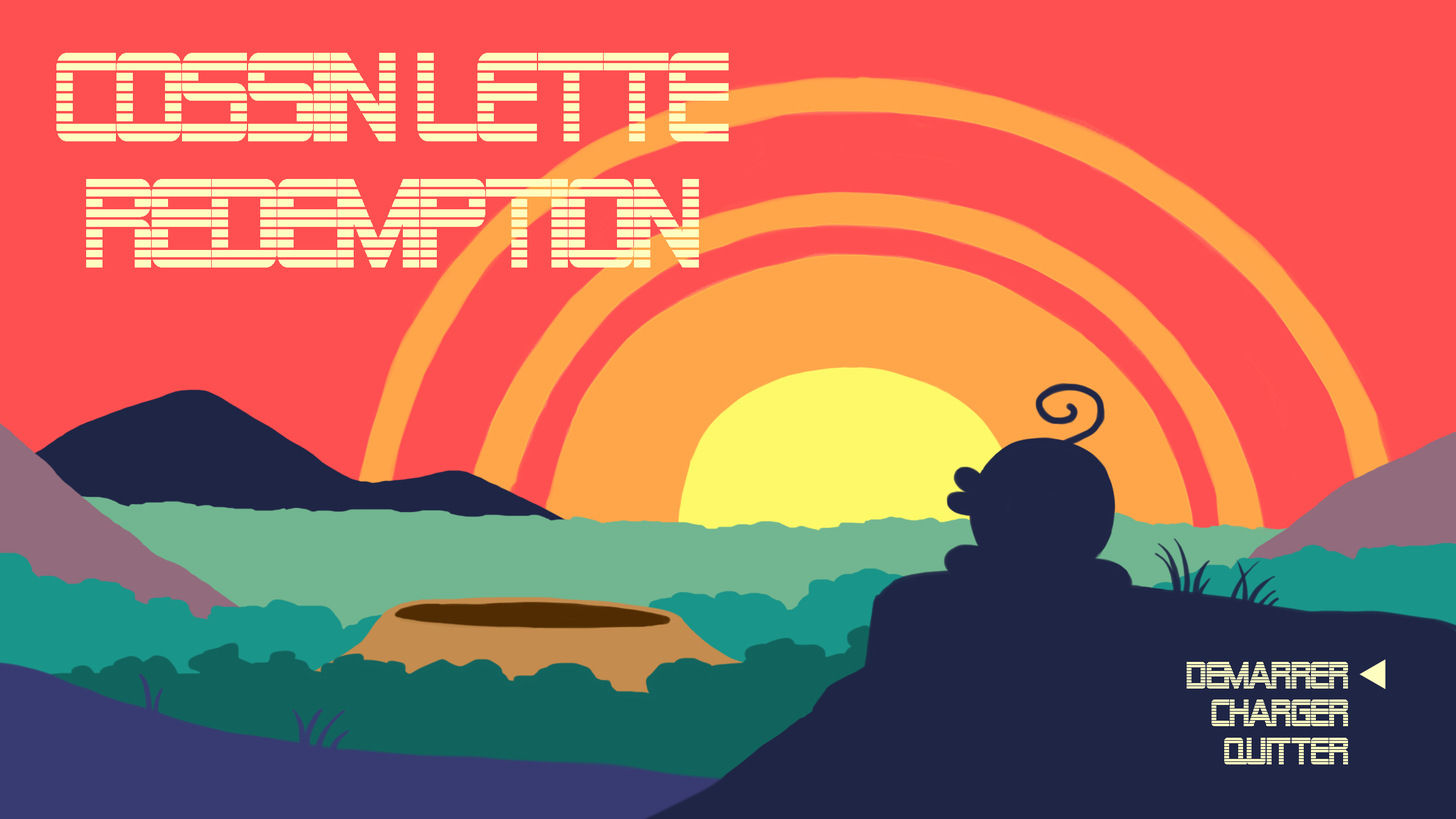
<style>
.page{position:relative;width:1456px;height:819px;background:#ff5051}
.page>*{position:absolute;margin:0}
.t1{font:126.4px/126.4px "AlienEncounters";letter-spacing:-0.05em;color:#fffdc0;scale:0.85 1}
.t2{font:37.9px/37.9px "AlienEncounters";letter-spacing:-0.05em;color:#fffdc0;scale:0.85 1}
</style>
<div class="page">
<p class="t1" style="left:56px;top:53px;width:673px;height:215px;text-align:center">cossin lette<br>redemption</p>
<p class="t2" style="left:1187px;top:662px;width:161px;height:102px;text-align:right">demarrer<br>charger<br>quitter</p>
</div>
